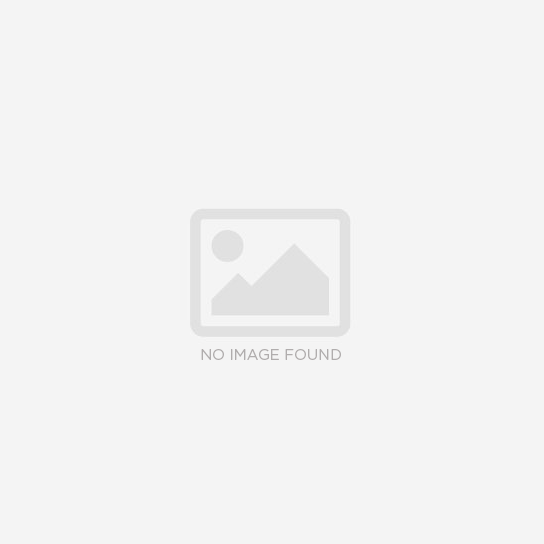
<style>
.page{position:relative;width:544px;height:544px;background:#f4f4f4}
.page>*{position:absolute;margin:0}
.t1{font:15px "Gotham-Book";color:#b0adad;text-transform:uppercase}
</style>
<div class="page">
<p class="t1" style="left:201px;top:349px;width:140px;height:11px">no image found</p>
</div>
